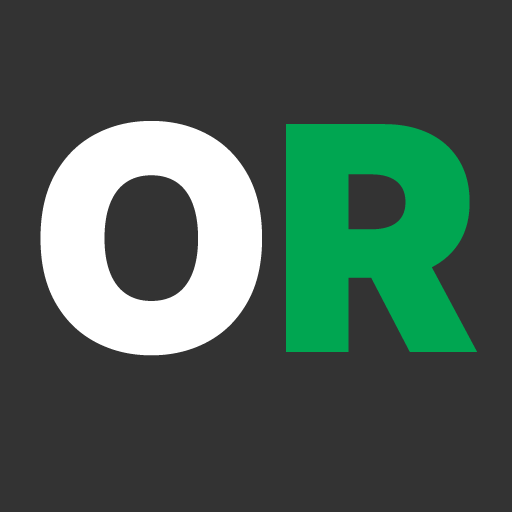
<style>
.page{position:relative;width:512px;height:512px;background:#333333}
.page>*{position:absolute;margin:0}
.t1{font:313px "Inter18pt-Black";color:#ffffff}
.t2{font:313px "Inter18pt-Black";color:#00a651}
</style>
<div class="page">
<p class="t1" style="left:40px;top:121px;width:437px;height:235px">O<span class="t2">R</span></p>
</div>
